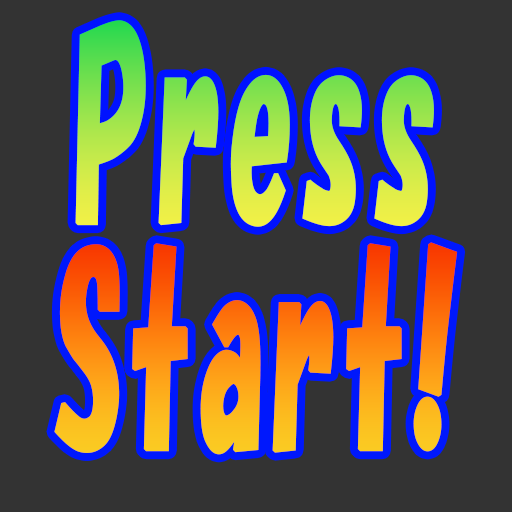
<style>
.page{position:relative;width:512px;height:512px;background:#333333}
.page>*{position:absolute;margin:0}
.t1{font:248.3px "HGPSoeiKakupoptai";letter-spacing:0.065em;font-weight:bold;scale:0.48 1}
.t2{font:253px "HGPSoeiKakupoptai";letter-spacing:0.065em;font-weight:bold;scale:0.48 1}
</style>
<div class="page">
<p class="t1" style="left:75px;top:20px;width:359px;height:207px">Press</p>
<p class="t2" style="left:54px;top:242px;width:404px;height:213px">Start!</p>
</div>
